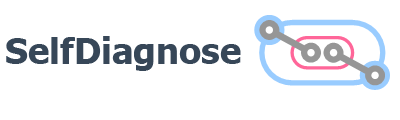
<style>
.page{position:relative;width:400px;height:120px;background:#ffffff}
.page>*{position:absolute;margin:0}
.t1{font:36px "Tahoma-Bold";color:#374758}
</style>
<div class="page">
<p class="t1" style="left:6px;top:36px;width:235px;height:35px">SelfDiagnose</p>
</div>
